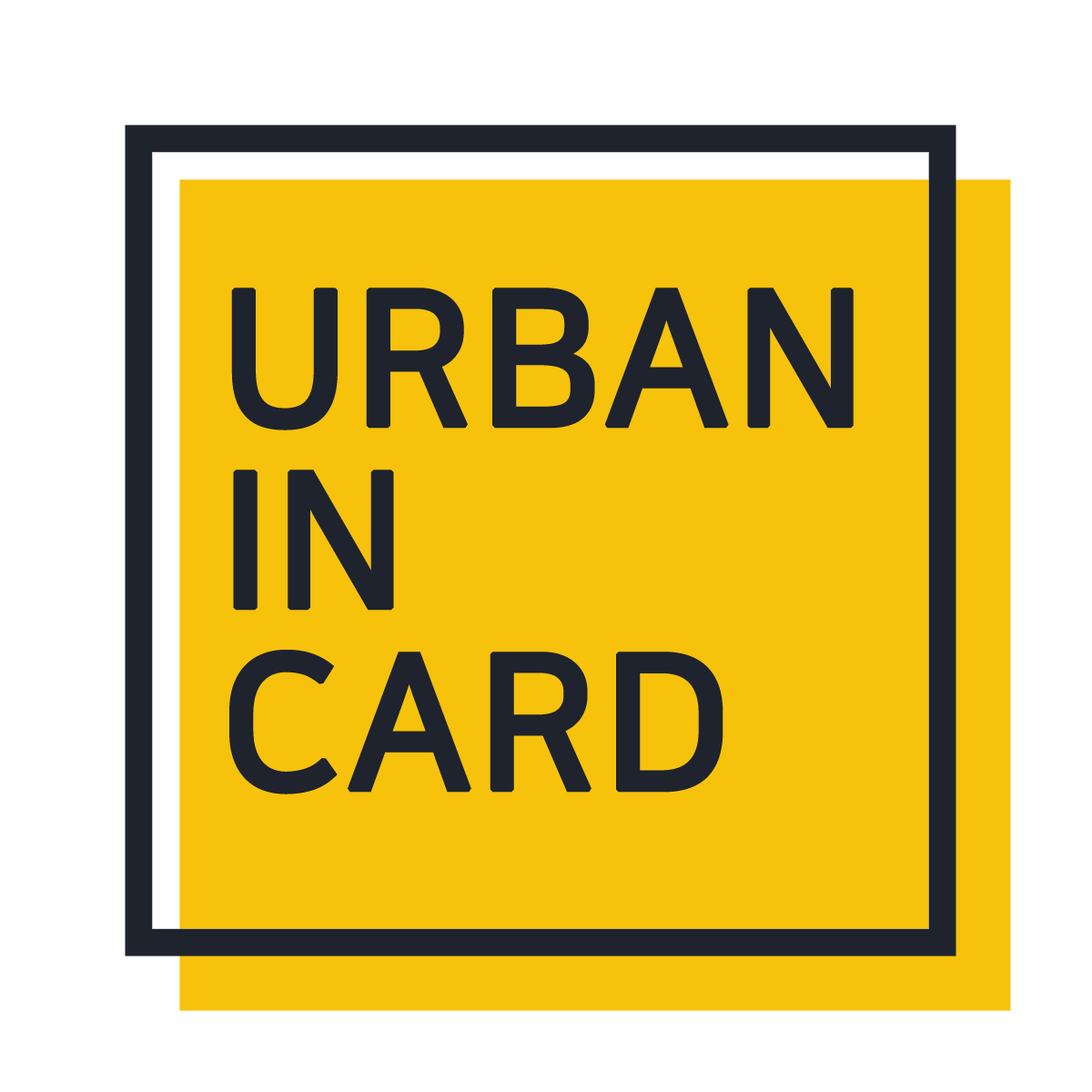
<style>
.page{position:relative;width:1092px;height:1092px;background:#f6c20c}
.page>*{position:absolute;margin:0}
.t1{font:187.3px/182px "NanumSquareB";color:#1e232d;font-weight:bold}
</style>
<div class="page">
<p class="t1" style="left:229px;top:288px;width:625px;height:506px">URBAN<br>IN<br>CARD</p>
</div>
